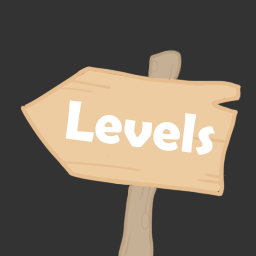
<style>
.page{position:relative;width:256px;height:256px;background:#333333}
.page>*{position:absolute;margin:0}
.t1{font:56px "BerlinSansFBDemi-Bold";color:#ffffff}
</style>
<div class="page">
<p class="t1" style="left:65px;top:100px;width:150px;height:55px;rotate:7deg">Levels</p>
</div>
